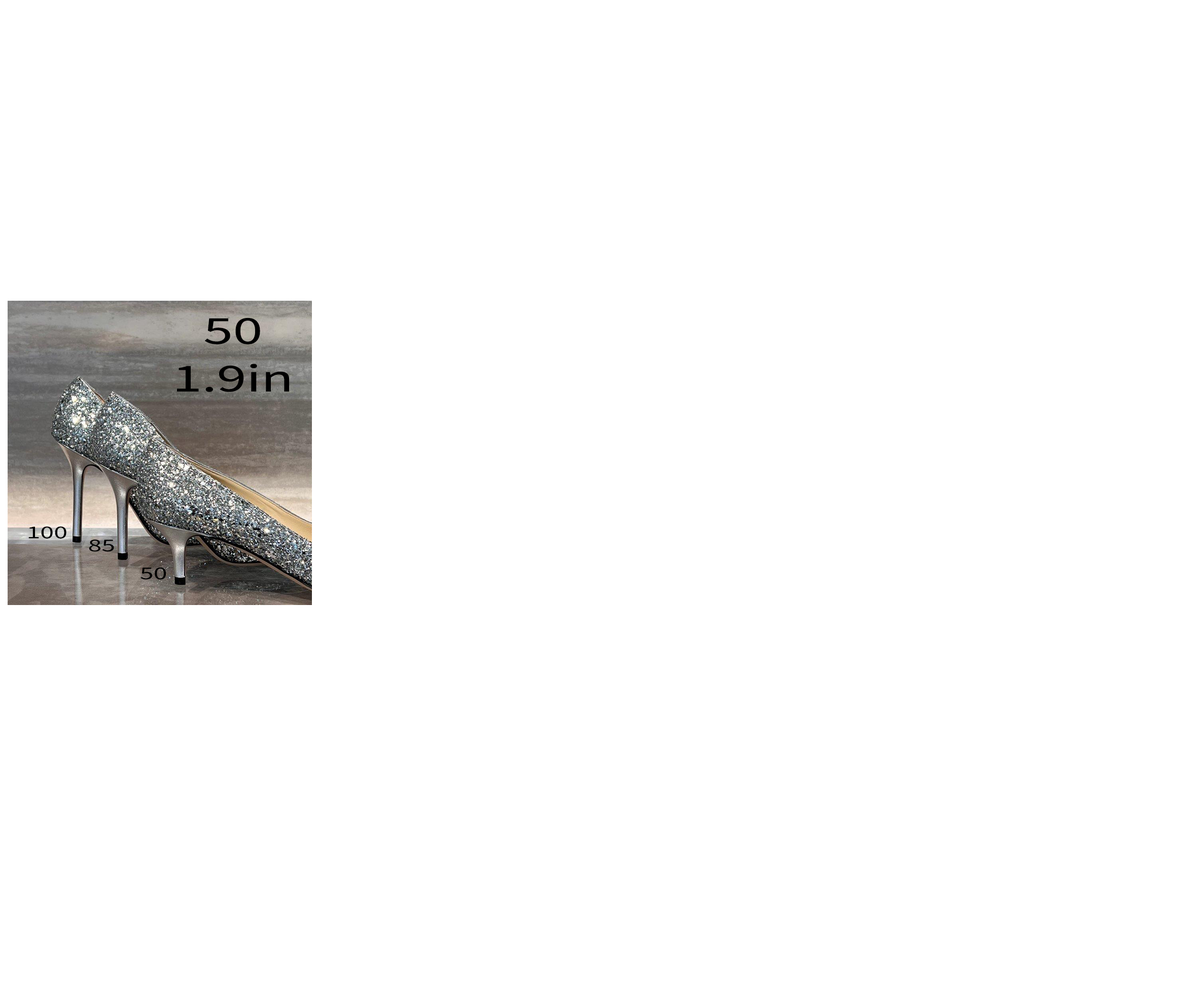
<style>
.page{position:relative;width:1199px;height:994px;background:#ffffff}
.page>*{position:absolute;margin:0}
.t1{font:39.7px "SourceSans3Roman-Regular";color:#000000;scale:1.5 1}
.t2{font:18.3px "SourceSans3Roman-Regular";color:#000000;scale:1.5 1}
</style>
<div class="page">
<p class="t1" style="left:177px;top:318px;width:112px;height:74px;text-align:center">50<br>1.9in</p>
<p class="t2" style="left:28px;top:527px;width:38px;height:12px">100</p>
<p class="t2" style="left:89px;top:539px;width:25px;height:13px">85</p>
<p class="t2" style="left:141px;top:567px;width:25px;height:13px">50</p>
</div>
